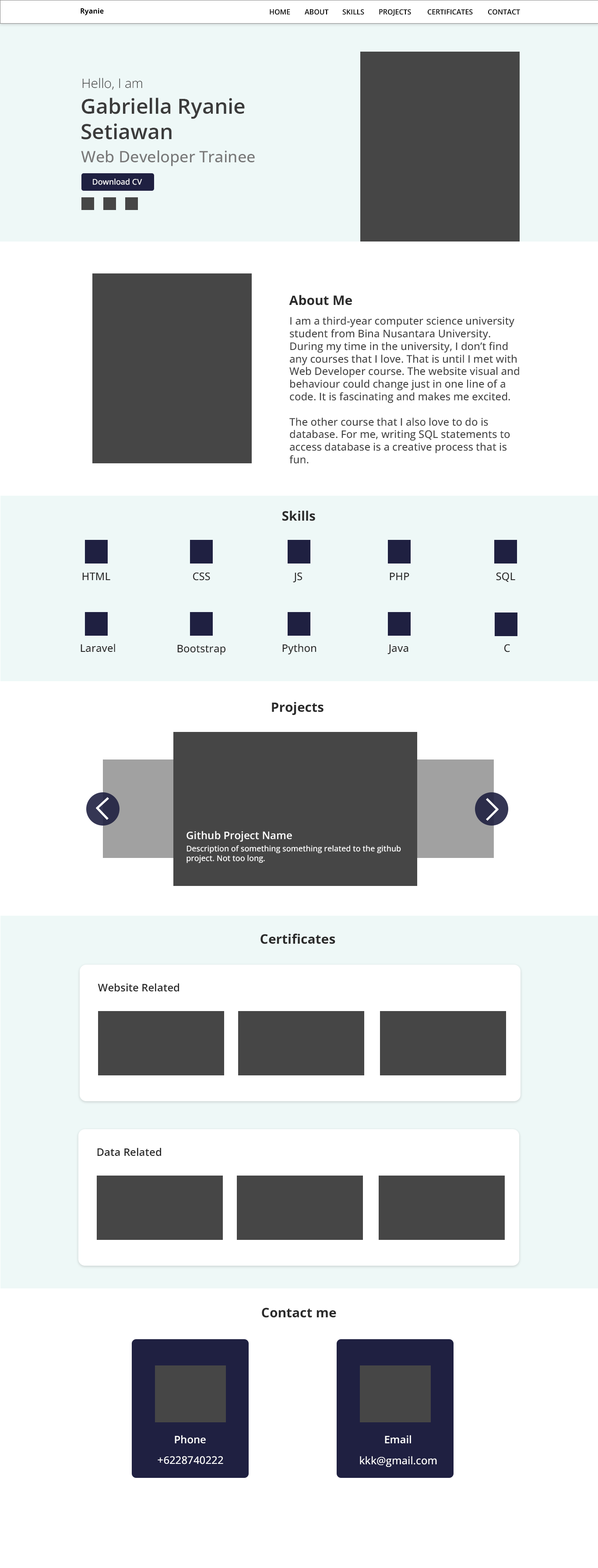
<style>
.page{position:relative;width:598px;height:1568px;background:#ffffff}
.page>*{position:absolute;margin:0}
.t1{font:7px "OpenSans-Bold";color:#000000}
.t2{font:7px "OpenSans-SemiBold";color:#000000}
.t3{font:13.1px "OpenSans-Light";color:#3b3b3b}
.t4{font:21px "OpenSans-SemiBold";color:#3b3b3b}
.t5{font:15.8px "OpenSans-Medium";color:#787878}
.t6{font:7.9px "OpenSans-Medium";color:#ffffff}
.t7{font:13.1px "OpenSans-Bold";color:#2a2a2a}
.t8{font:10.5px "OpenSans-Medium";color:#424242}
.t9{font:10.5px "OpenSans-Medium";color:#2a2a2a}
.t10{font:10.5px "OpenSans-SemiBold";color:#ffffff}
.t11{font:10.5px "OpenSans-SemiBold";color:#2a2a2a}
.t12{font:10.5px "OpenSans-Medium";color:#ffffff}
</style>
<div class="page">
<p class="t1" style="left:80px;top:8px;width:24px;height:7px">Ryanie</p>
<p class="t2" style="left:270px;top:9px;width:20px;height:6px">HOME</p>
<p class="t2" style="left:304px;top:9px;width:25px;height:6px">ABOUT</p>
<p class="t2" style="left:342px;top:9px;width:22px;height:6px">SKILLS</p>
<p class="t2" style="left:379px;top:9px;width:32px;height:7px">PROJECTS</p>
<p class="t2" style="left:427px;top:9px;width:45px;height:6px">CERTIFICATES</p>
<p class="t2" style="left:487px;top:9px;width:33px;height:6px">CONTACT</p>
<p class="t3" style="left:82px;top:78px;width:60px;height:12px">Hello, I am</p>
<p class="t4" style="left:81px;top:98px;width:164px;height:42px">Gabriella Ryanie<br>Setiawan</p>
<p class="t5" style="left:81px;top:150px;width:174px;height:16px">Web Developer Trainee</p>
<p class="t6" style="left:93px;top:178px;width:49px;height:7px">Download CV</p>
<p class="t7" style="left:289px;top:295px;width:63px;height:10px">About Me</p>
<p class="t8" style="left:289px;top:316px;width:230px;height:148px">I am a third-year computer science university <br>student from Bina Nusantara University. <br>During my time in the university, I don’t find<br>any courses that I love. That is until I met with<br>Web Developer course. The website visual and<br>behaviour could change just in one line of a<br>code. It is fascinating and makes me excited.<br><br>The other course that I also love to do is<br>database. For me, writing SQL statements to<br>access database is a creative process that is<br>fun.</p>
<p class="t7" style="left:282px;top:511px;width:33px;height:10px">Skills</p>
<p class="t9" style="left:82px;top:572px;width:28px;height:8px">HTML</p>
<p class="t9" style="left:193px;top:572px;width:17px;height:9px">CSS</p>
<p class="t9" style="left:293px;top:572px;width:9px;height:10px">JS</p>
<p class="t9" style="left:389px;top:573px;width:20px;height:7px">PHP</p>
<p class="t9" style="left:496px;top:572px;width:19px;height:10px">SQL</p>
<p class="t9" style="left:80px;top:644px;width:35px;height:8px">Laravel</p>
<p class="t9" style="left:177px;top:645px;width:48px;height:10px">Bootstrap</p>
<p class="t9" style="left:282px;top:644px;width:34px;height:10px">Python</p>
<p class="t9" style="left:387px;top:644px;width:21px;height:10px">Java</p>
<p class="t9" style="left:504px;top:644px;width:6px;height:8px">C</p>
<p class="t7" style="left:272px;top:702px;width:51px;height:13px">Projects</p>
<p class="t10" style="left:186px;top:831px;width:106px;height:11px">Github Project Name</p>
<p class="t6" style="left:186px;top:845px;width:215px;height:18px">Description of something something related to the github<br>project. Not too long.</p>
<p class="t7" style="left:260px;top:934px;width:75px;height:10px">Certificates</p>
<p class="t11" style="left:98px;top:983px;width:81px;height:9px">Website Related</p>
<p class="t11" style="left:97px;top:1148px;width:64px;height:8px">Data Related</p>
<p class="t7" style="left:262px;top:1308px;width:74px;height:10px">Contact me</p>
<p class="t10" style="left:175px;top:1435px;width:31px;height:9px">Phone</p>
<p class="t10" style="left:385px;top:1435px;width:26px;height:8px">Email</p>
<p class="t12" style="left:158px;top:1456px;width:65px;height:8px">+6228740222</p>
<p class="t12" style="left:360px;top:1456px;width:77px;height:11px">kkk@gmail.com</p>
</div>
